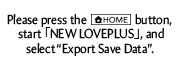
<style>
.page{position:relative;width:180px;height:68px;background:#ffffff}
.page>*{position:absolute;margin:0}
.t1{font:13.2px "Amira-Roman";color:#000000;scale:0.91 1}
.t2{font:13.2px "KozGoPr6N-Regular";color:#000000;scale:0.91 1}
</style>
<div class="page">
<p class="t1" style="left:7px;top:14px;width:165px;height:13px">Please press the                  button,</p>
<p class="t1" style="left:18px;top:27px;width:146px;height:29px;text-align:center">start <span class="t2">「</span>NEW LOVEPLUS<span class="t2">」</span>, and <br>select “Export Save Data”.</p>
</div>
